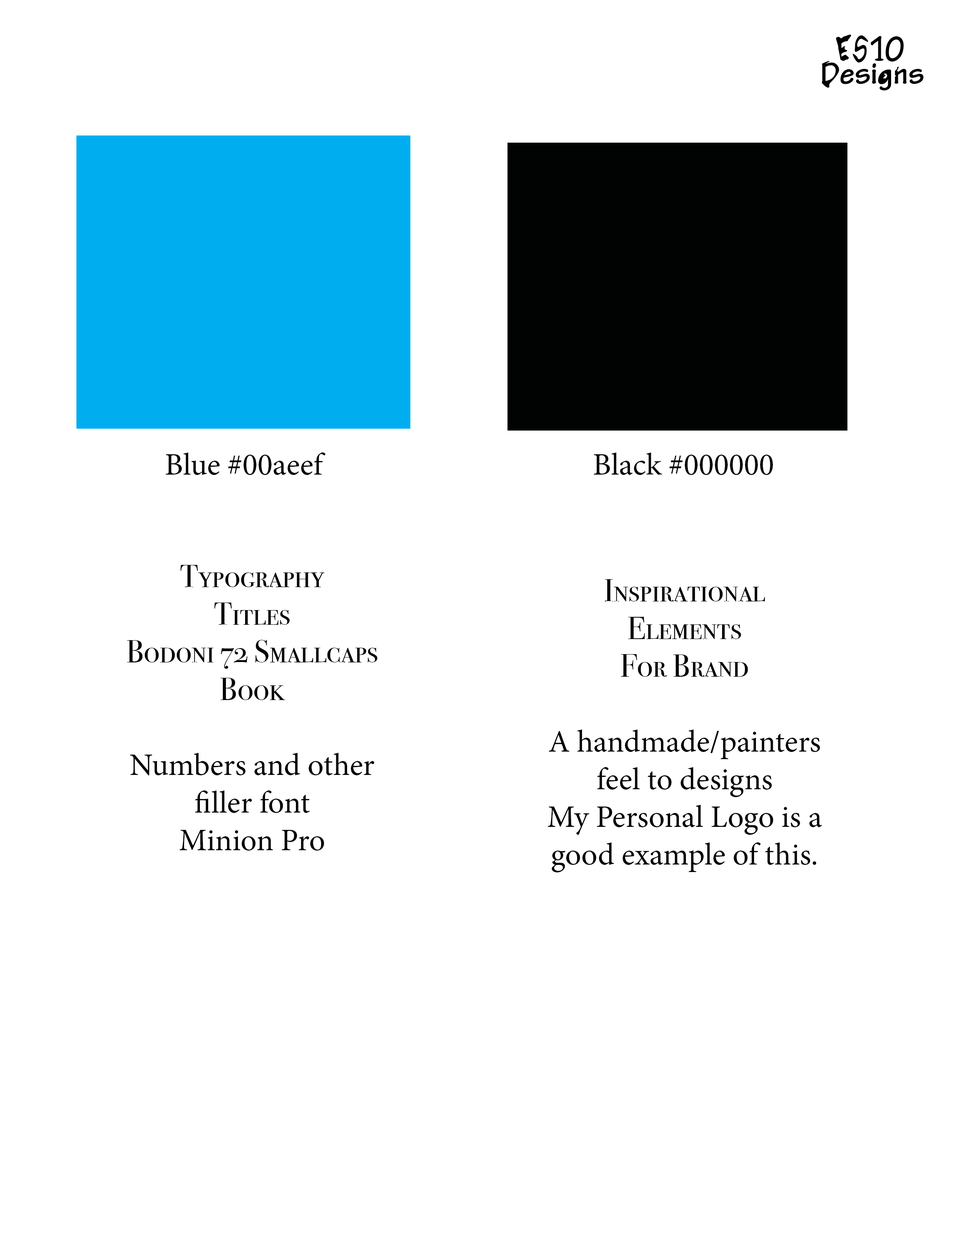
<style>
.page{position:relative;width:960px;height:1242px;background:#ffffff}
.page>*{position:absolute;margin:0}
.t1{font:31.4px "MinionPro-Regular";color:#010202}
.t2{font:31.4px "BodoniSvtyTwoSCITCTT-Book";color:#010202}
</style>
<div class="page">
<p class="t1" style="left:166px;top:452px;width:160px;height:23px">Blue #00aeef</p>
<p class="t1" style="left:594px;top:452px;width:179px;height:23px">Black #000000</p>
<p class="t2" style="left:127px;top:565px;width:251px;height:286px;text-align:center">Typography<br>Titles<br>Bodoni 72 Smallcaps Book<br><br><span class="t1">Numbers and other filler font<br>Minion Pro</span></p>
<p class="t1" style="left:548px;top:579px;width:274px;height:294px;text-align:center"><span class="t2">Inspirational<br>Elements<br>For Brand<br><br></span>A handmade/painters<br>feel to designs<br>My Personal Logo is a good example of this.</p>
</div>
